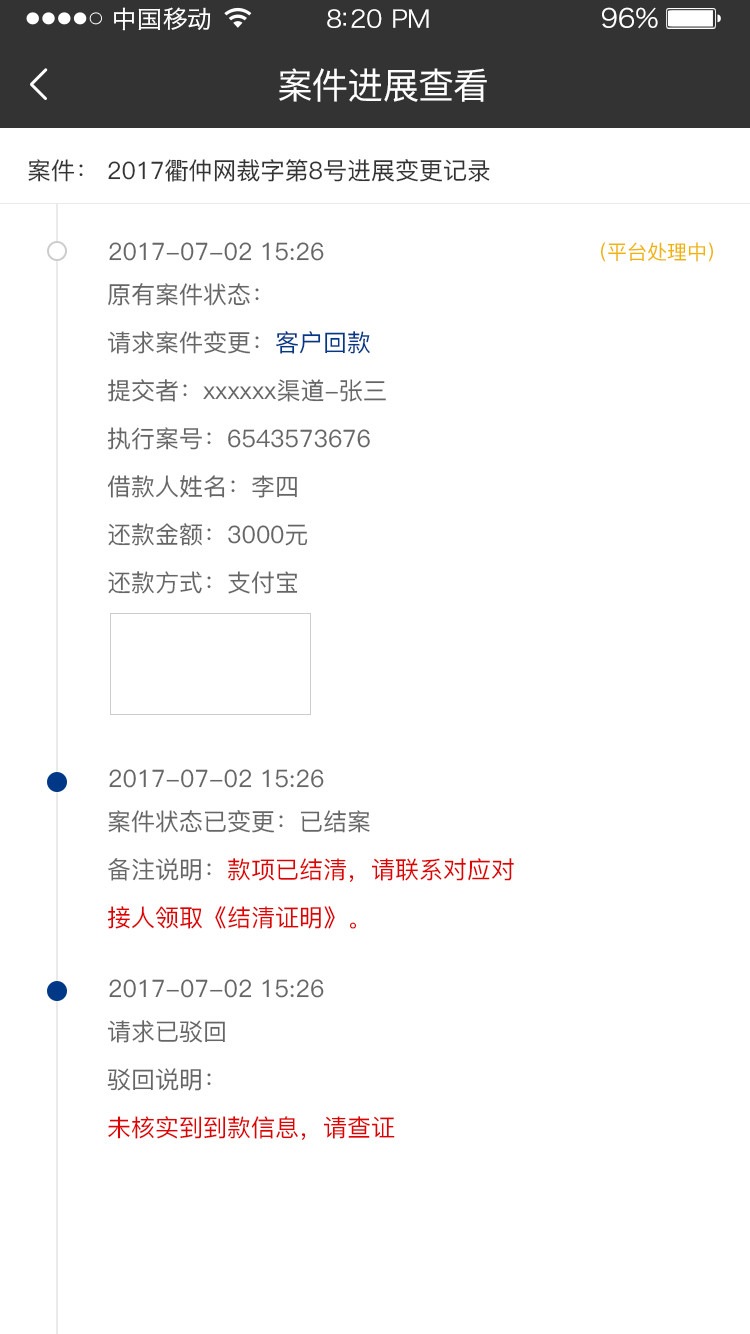
<style>
.page{position:relative;width:750px;height:1334px;background:#ffffff}
.page>*{position:absolute;margin:0}
.t1{font:24px "HiraginoSansGB-W3";letter-spacing:0.02em;color:#ffffff;scale:1.03 1}
.t2{font:24px "HiraginoSansGB-W3";letter-spacing:-0.02em;color:#ffffff;scale:1.03 1}
.t3{font:26.2px "HiraginoSansGB-W3";letter-spacing:-0.02em;color:#ffffff;scale:1.03 1}
.t4{font:36px "PingFang-SC-Medium";letter-spacing:-0.02em;color:#ffffff}
.t5{font:24px "PingFang-SC-Medium";color:#333333}
.t6{font:24px "PingFang-SC-Medium";color:#666666}
.t7{font:20px "PingFang-SC-Medium";color:#f0b300}
.t8{font:24px/48px "PingFang-SC-Medium";color:#666666}
.t9{font:24px/48px "PingFang-SC-Medium";color:#003888}
.t10{font:24px/48px "PingFang-SC-Medium";color:#de0101}
</style>
<div class="page">
<p class="t1" style="left:114px;top:7px;width:97px;height:24px">中国移动</p>
<p class="t2" style="left:327px;top:9px;width:102px;height:19px">8:20 PM</p>
<p class="t3" style="left:602px;top:7px;width:56px;height:22px">96%</p>
<p class="t4" style="left:279px;top:68px;width:208px;height:34px">案件进展查看</p>
<p class="t5" style="left:28px;top:159px;width:462px;height:23px">案件： 2017衢仲网裁字第8号进展变更记录</p>
<p class="t6" style="left:109px;top:242px;width:215px;height:19px">2017-07-02 15:26</p>
<p class="t7" style="left:600px;top:242px;width:114px;height:20px">（平台处理中）</p>
<p class="t8" style="left:107px;top:283px;width:279px;height:311px">原有案件状态：<br>请求案件变更：<span class="t9">客户回款<br></span>提交者：xxxxxx渠道-张三<br>执行案号：6543573676<br>借款人姓名：李四<br>还款金额：3000元<br>还款方式：支付宝</p>
<p class="t6" style="left:109px;top:769px;width:215px;height:19px">2017-07-02 15:26</p>
<p class="t10" style="left:107px;top:810px;width:407px;height:119px"><span class="t8">案件状态已变更：已结案<br>备注说明：</span>款项已结清，请联系对应对<br>接人领取《结清证明》。</p>
<p class="t6" style="left:109px;top:979px;width:215px;height:19px">2017-07-02 15:26</p>
<p class="t10" style="left:107px;top:1020px;width:288px;height:120px"><span class="t8">请求已驳回<br>驳回说明：<br></span>未核实到到款信息，请查证</p>
</div>
